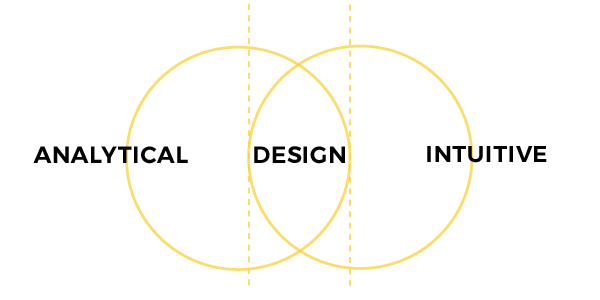
<style>
.page{position:relative;width:600px;height:300px;background:#ffffff}
.page>*{position:absolute;margin:0}
.t1{font:23.5px "Montserrat-SemiBold";color:#030000;text-transform:uppercase}
.t2{font:23px "Montserrat-SemiBold";color:#030000;text-transform:uppercase}
</style>
<div class="page">
<p class="t1" style="left:33px;top:146px;width:155px;height:18px">Analytical</p>
<p class="t1" style="left:254px;top:146px;width:91px;height:18px">Design</p>
<p class="t2" style="left:427px;top:146px;width:120px;height:17px">intuitive</p>
</div>
